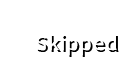
<style>
.page{position:relative;width:120px;height:60px;background:#ffffff}
.page>*{position:absolute;margin:0}
.t1{font:20.8px "Amiko-Regular";color:#000000}
</style>
<div class="page">
<p class="t1" style="left:37px;top:36px;width:82px;height:21px">Skipped</p>
</div>
